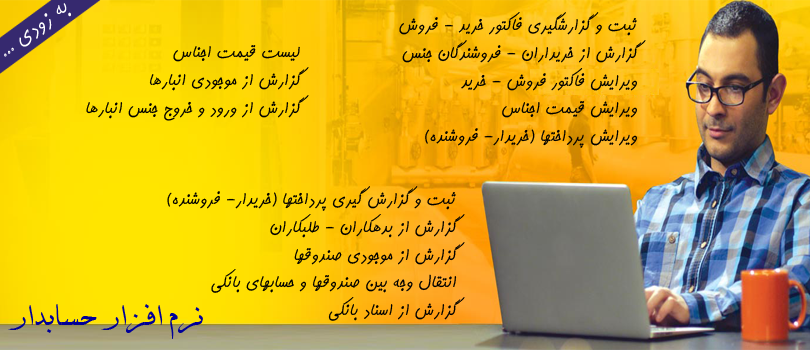
<style>
.page{position:relative;width:810px;height:350px}
.page>*{position:absolute;margin:0}
.t1{font:28px "KamranBold";color:#ffffff}
.t2{font:23px "KamranBold";color:#000000}
.t3{font:36px "BDavat";color:#000099}
</style>
<div class="page">
<p class="t1" style="left:4px;top:3px;width:67px;height:54px;rotate:-37deg">به زودي ...</p>
<p class="t2" style="left:399px;top:12px;width:247px;height:136px">ثبت و گزارشگيري فاکتور خريد - فروش  <br>گزارش از خريداران - فروشندگان جنس<br>ويرايش فاکتور فروش - خريد<br>ويرايش قيمت اجناس<br>ويرايش پرداختها (خريدار- فروشنده)</p>
<p class="t2" style="left:86px;top:45px;width:223px;height:76px">ليست قيمت اجناس<br>گزارش از موجودي انبارها<br>گزارش از ورود و خروج جنس انبارها</p>
<p class="t2" style="left:167px;top:186px;width:298px;height:135px">ثبت و گزارش گيري پرداختها (خريدار- فروشنده)<br>گزارش از بدهکاران - طلبکاران<br>گزارش از موجودي صندوقها<br>انتقال وجه بين صندوقها و حسابهاي بانکي<br>گزارش از اسناد بانکي</p>
<p class="t3" style="left:8px;top:304px;width:195px;height:35px">نرم افزار حسابدار</p>
</div>
